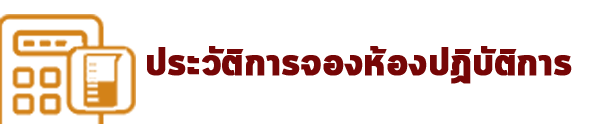
<style>
.page{position:relative;width:594px;height:124px;background:#ffffff}
.page>*{position:absolute;margin:0}
.t1{font:39.4px "Cloud-Bold";letter-spacing:-0.01em;color:#760606;font-weight:bold}
</style>
<div class="page">
<p class="t1" style="left:147px;top:46px;width:425px;height:38px">ประวัติการจองห้องปฏิบัติการ</p>
</div>
